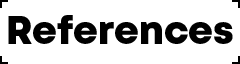
<style>
.page{position:relative;width:240px;height:64px;background:#ffffff}
.page>*{position:absolute;margin:0}
.t1{font:38.7px "Mont-HeavyDEMO";color:#000000}
</style>
<div class="page">
<p class="t1" style="left:8px;top:15px;width:225px;height:29px">References</p>
</div>
